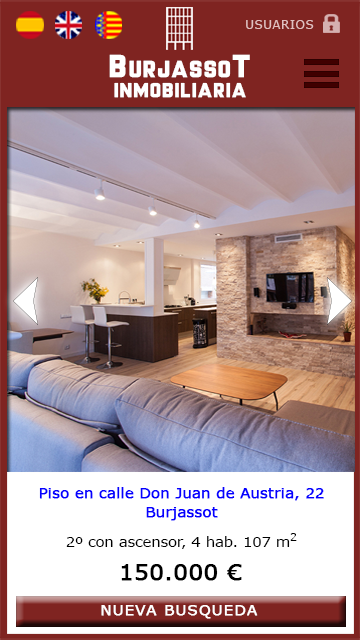
<style>
.page{position:relative;width:360px;height:640px;background:#ffffff}
.page>*{position:absolute;margin:0}
.t1{font:11.6px "MSReferenceSansSerif";letter-spacing:0.07em;color:#e0c0c0}
.t2{font:21.7px "MrHeadlines";letter-spacing:0.07em;color:#ffffff;scale:1.11 1}
.t3{font:29.6px "MrHeadlines";letter-spacing:0.07em;color:#ffffff;scale:1.11 1}
.t4{font:18.8px "MrHeadlines";letter-spacing:0.07em;color:#ffffff;scale:1.11 1}
.t5{font:14px/19px "MSReferenceSansSerif";color:#0600ff;font-weight:bold;scale:1.04 1}
.t6{font:14px "MSReferenceSansSerif";color:#000000;scale:1.04 1}
.t7{font:11px "MSReferenceSansSerif";color:#000000;scale:1.04 1}
.t8{font:22px "MSReferenceSansSerif";color:#000000;font-weight:bold;scale:1.04 1}
.t9{font:14px "MSReferenceSansSerif";letter-spacing:0.07em;color:#ffffff;font-weight:bold;scale:1.04 1}
</style>
<div class="page">
<p class="t1" style="left:246px;top:20px;width:68px;height:9px">USUARIOS</p>
<p class="t2" style="left:109px;top:54px;width:141px;height:24px"><span class="t3">B</span>URJASSO<span class="t3">T</span></p>
<p class="t4" style="left:114px;top:82px;width:132px;height:16px">INMOBILIARIA</p>
<p class="t5" style="left:39px;top:487px;width:285px;height:34px;text-align:center">Piso en calle Don Juan de Austria, 22<br>Burjassot</p>
<p class="t6" style="left:66px;top:533px;width:231px;height:16px">2º con ascensor, 4 hab. 107 m<span class="t7">2</span></p>
<p class="t8" style="left:121px;top:564px;width:121px;height:17px">150.000 €</p>
<p class="t9" style="left:101px;top:605px;width:157px;height:14px">NUEVA BUSQUEDA</p>
</div>
